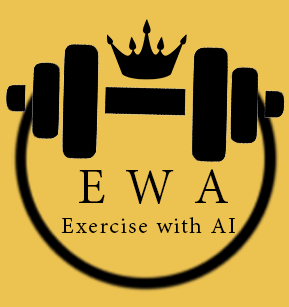
<style>
.page{position:relative;width:289px;height:307px;background:#ecc251}
.page>*{position:absolute;margin:0}
.t1{font:61.8px "AdobeThai-Regular";letter-spacing:0.06em;color:#000000}
.t2{font:27.7px "AdobeThai-Regular";letter-spacing:0.06em;color:#000000}
</style>
<div class="page">
<p class="t1" style="left:79px;top:169px;width:149px;height:35px">E W A</p>
<p class="t2" style="left:61px;top:217px;width:174px;height:16px">Exercise with AI</p>
</div>
